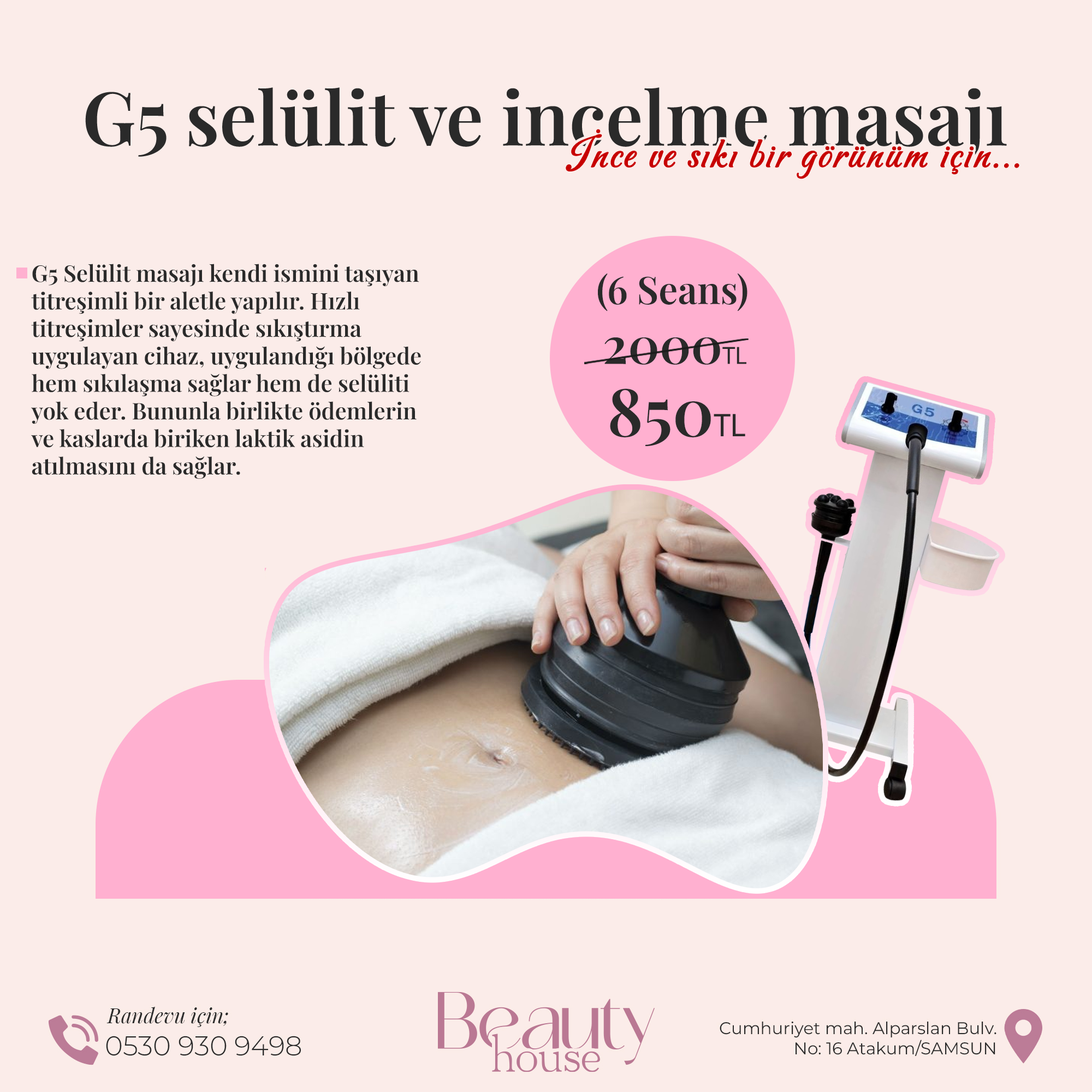
<style>
.page{position:relative;width:1092px;height:1092px;background:#fbece9}
.page>*{position:absolute;margin:0}
.t1{font:43.6px "Carattere-Regular";letter-spacing:0.05em;color:#c70000}
.t2{font:22.9px "PlayfairDisplay-SemiBold";color:#2a2a2a}
.t3{font:38.1px "PlayfairDisplay-SemiBold";color:#2a2a2a}
.t4{font:50px "PlayfairDisplay-SemiBold";color:#2a2a2a}
.t5{font:25.2px "MyriadPro-Regular";color:#2a2a2a}
.t6{font:65.8px "PlayfairDisplay-SemiBold";color:#2a2a2a}
.t7{font:33.1px "MyriadPro-Regular";color:#2a2a2a}
</style>
<div class="page">
<p class="t1" style="left:566px;top:129px;width:453px;height:50px">İnce ve sıkı bir görünüm için...</p>
<p class="t2" style="left:31px;top:264px;width:390px;height:215px">G5 Selülit masajı kendi ismini taşıyan titreşimli bir aletle yapılır. Hızlı titreşimler sayesinde sıkıştırma uygulayan cihaz, uygulandığı bölgede hem sıkılaşma sağlar hem de selüliti yok eder. Bununla birlikte ödemlerin ve kaslarda biriken laktik asidin atılmasını da sağlar.</p>
<p class="t3" style="left:598px;top:273px;width:149px;height:38px">(6 Seans)</p>
<p class="t4" style="left:604px;top:337px;width:142px;height:28px">2000<span class="t5">TL</span></p>
<p class="t6" style="left:610px;top:389px;width:135px;height:57px">850<span class="t7">TL</span></p>
</div>
